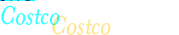
<style>
.page{position:relative;width:179px;height:35px;background:#ffffff}
.page>*{position:absolute;margin:0}
.t1{font:30px "MrsEavesItalic";color:#37ffff}
</style>
<div class="page">
<p class="t1" style="left:1px;top:5px;width:59px;height:20px">Costco</p>
</div>
